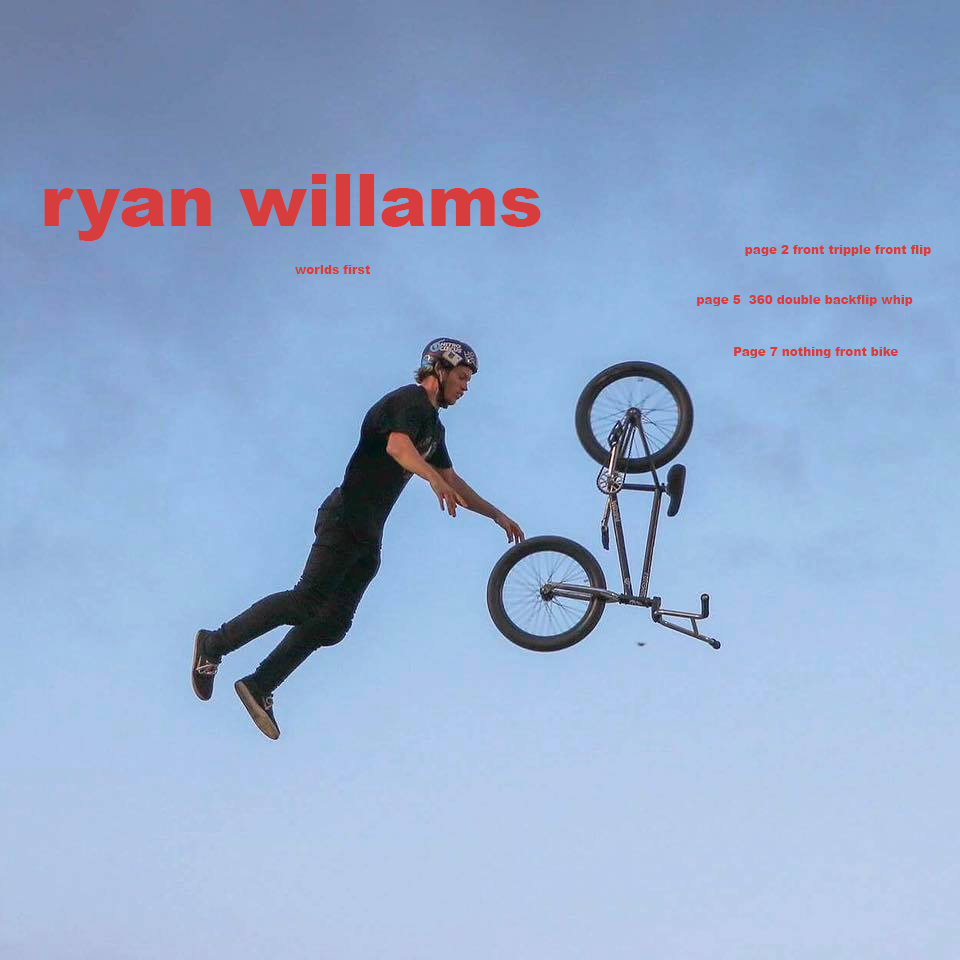
<style>
.page{position:relative;width:960px;height:960px}
.page>*{position:absolute;margin:0}
.t1{font:72px "Arial-Black";color:#d73d3d}
.t2{font:12px "Arial-Black";color:#d73d3d}
</style>
<div class="page">
<p class="t1" style="left:44px;top:174px;width:497px;height:67px">ryan willams</p>
<p class="t2" style="left:745px;top:245px;width:186px;height:11px">page 2 front tripple front flip</p>
<p class="t2" style="left:295px;top:265px;width:75px;height:9px">worlds first</p>
<p class="t2" style="left:697px;top:295px;width:216px;height:11px">page 5  360 double backflip whip</p>
<p class="t2" style="left:734px;top:347px;width:164px;height:11px">Page 7 nothing front bike</p>
</div>
